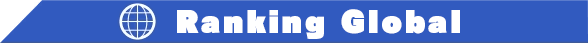
<style>
.page{position:relative;width:588px;height:44px;background:#315abf}
.page>*{position:absolute;margin:0}
.t1{font:29.3px "RaglanStd-UB";letter-spacing:0.093em;color:#ffffff}
</style>
<div class="page">
<p class="t1" style="left:177px;top:9px;width:283px;height:30px">Ranking Global</p>
</div>
